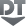
<style>
.page{position:relative;width:26px;height:26px;background:#ffffff}
.page>*{position:absolute;margin:0}
.t1{font:23.2px "Bauhaus93";letter-spacing:-0.05em;color:#787d81}
</style>
<div class="page">
<p class="t1" style="left:0px;top:0px;width:26px;height:15px">DT</p>
</div>
